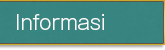
<style>
.page{position:relative;width:165px;height:50px;background:#378481}
.page>*{position:absolute;margin:0}
.t1{font:20px "GothicMB101Pro-Light";color:#fbfbf9}
</style>
<div class="page">
<p class="t1" style="left:17px;top:14px;width:87px;height:16px">Informasi</p>
</div>
